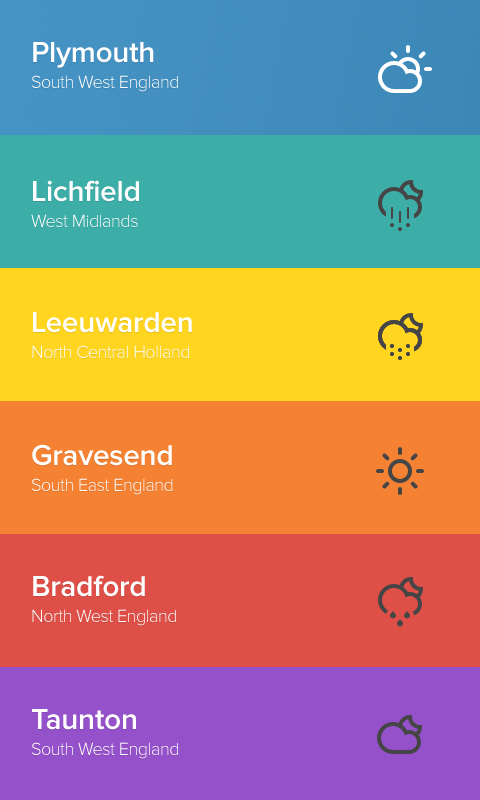
<style>
.page{position:relative;width:480px;height:800px}
.page>*{position:absolute;margin:0}
.t1{font:30px "ProximaNova-Semibold";letter-spacing:-0.01em;color:#ffffff}
.t2{font:18px "ProximaNova-Light";letter-spacing:-0.025em;color:#ffffff}
</style>
<div class="page">
<p class="t1" style="left:33px;top:42px;width:121px;height:26px">Plymouth</p>
<p class="t2" style="left:32px;top:75px;width:146px;height:17px">South West England</p>
<p class="t1" style="left:33px;top:180px;width:106px;height:22px">Lichfield</p>
<p class="t2" style="left:31px;top:214px;width:107px;height:13px">West Midlands</p>
<p class="t1" style="left:33px;top:312px;width:159px;height:21px">Leeuwarden</p>
<p class="t2" style="left:32px;top:345px;width:157px;height:13px">North Central Holland</p>
<p class="t1" style="left:32px;top:444px;width:140px;height:22px">Gravesend</p>
<p class="t2" style="left:32px;top:478px;width:141px;height:17px">South East England</p>
<p class="t1" style="left:33px;top:575px;width:112px;height:22px">Bradford</p>
<p class="t2" style="left:32px;top:609px;width:144px;height:17px">North West England</p>
<p class="t1" style="left:32px;top:709px;width:104px;height:21px">Taunton</p>
<p class="t2" style="left:32px;top:742px;width:146px;height:17px">South West England</p>
</div>
